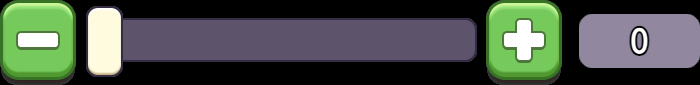
<style>
.page{position:relative;width:700px;height:85px;background:#000000}
.page>*{position:absolute;margin:0}
.t1{font:33px "WebPSD-18463539-0-Regular";color:#ffffff;font-weight:bold}
</style>
<div class="page">
<p class="t1" style="left:579px;top:14px;width:121px;height:54px">0</p>
</div>
